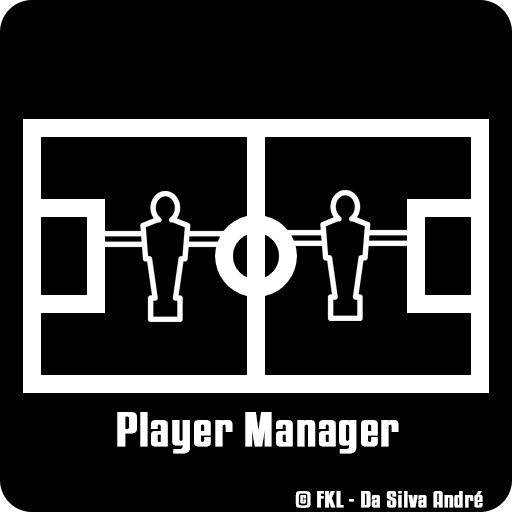
<style>
.page{position:relative;width:512px;height:512px;background:#000000}
.page>*{position:absolute;margin:0}
.t1{font:42px "KenyanCoffeeRg-Regular";color:#ffffff;font-weight:bold;scale:1.3 1}
.t2{font:20px "KenyanCoffeeRg-Regular";color:#ffffff;font-weight:bold;scale:1.3 1}
</style>
<div class="page">
<p class="t1" style="left:117px;top:412px;width:282px;height:42px">Player Manager</p>
<p class="t2" style="left:295px;top:491px;width:188px;height:17px">© FKL - Da Silva André</p>
</div>
